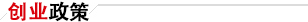
<style>
.page{position:relative;width:308px;height:22px;background:#ffffff}
.page>*{position:absolute;margin:0}
.t1{font:20px "AdobeHeitiStd-Regular";color:#db000a;font-weight:bold}
.t2{font:20px "AdobeHeitiStd-Regular";color:#000000;font-weight:bold}
</style>
<div class="page">
<p class="t1" style="left:8px;top:1px;width:81px;height:21px">创业<span class="t2">政策</span></p>
</div>
